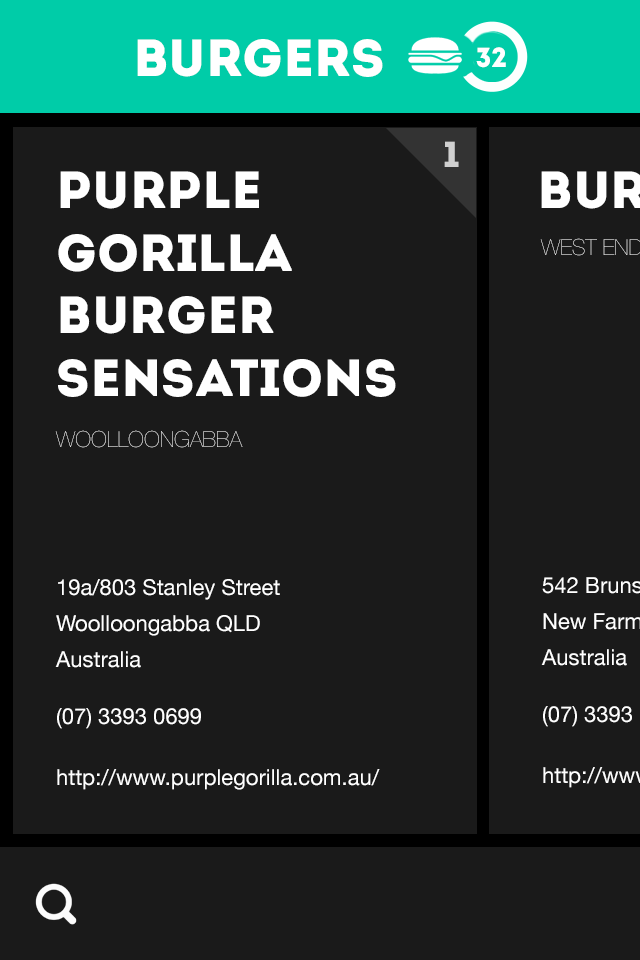
<style>
.page{position:relative;width:640px;height:960px;background:#1a1a1a}
.page>*{position:absolute;margin:0}
.t1{font:52px "Intro";color:#ffffff}
.t2{font:27.6px "Intro";color:#ffffff}
.t3{font:36px "Intro";color:#d0d0d0}
.t4{font:22px "HelveticaNeue-UltraLight"}
.t5{font:22px/36px "HelveticaNeue";color:#ffffff}
.t6{font:22px "HelveticaNeue";color:#ffffff}
</style>
<div class="page">
<p class="t1" style="left:137px;top:39px;width:246px;height:38px">BURGERS</p>
<p class="t2" style="left:476px;top:47px;width:30px;height:21px">32</p>
<p class="t3" style="left:444px;top:141px;width:15px;height:26px">1</p>
<p class="t1" style="left:58px;top:171px;width:338px;height:226px">PURPLE <br>GORILLA BURGER <br>SENSATIONS</p>
<p class="t4" style="left:540px;top:238px;width:102px;height:18px">WEST END</p>
<p class="t4" style="left:55px;top:430px;width:188px;height:18px">WOOLLOONGABBA</p>
<p class="t5" style="left:55px;top:579px;width:225px;height:89px">19a/803 Stanley Street<br>Woolloongabba QLD<br>Australia</p>
<p class="t6" style="left:57px;top:708px;width:144px;height:21px">(07) 3393 0699</p>
<p class="t6" style="left:57px;top:769px;width:323px;height:21px">http://www.purplegorilla.com.au/</p>
</div>
